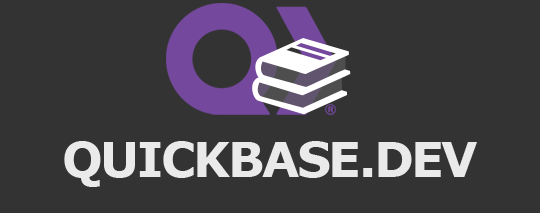
<style>
.page{position:relative;width:540px;height:213px;background:#333333}
.page>*{position:absolute;margin:0}
.t1{font:48px "Verdana-Bold";letter-spacing:-0.05em;color:#eaeaea}
</style>
<div class="page">
<p class="t1" style="left:64px;top:141px;width:413px;height:46px">QUICKBASE.DEV</p>
</div>
